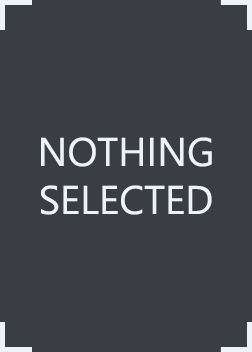
<style>
.page{position:relative;width:252px;height:352px;background:#3a3d43}
.page>*{position:absolute;margin:0}
.t1{font:40px "YuGothicUI-Regular";color:#edf1f9}
</style>
<div class="page">
<p class="t1" style="left:41px;top:137px;width:171px;height:78px;text-align:center">NOTHING<br>SELECTED</p>
</div>
